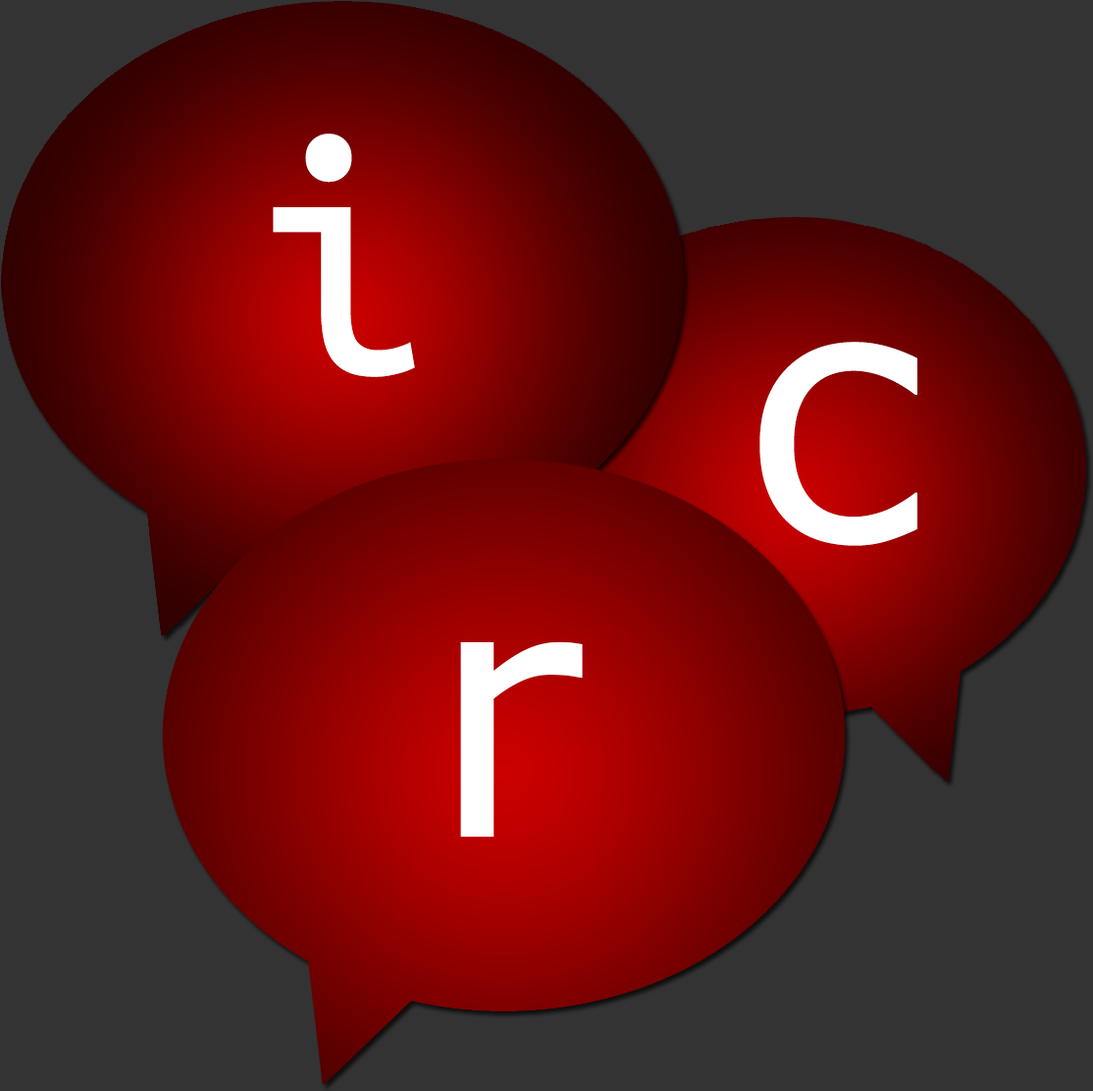
<style>
.page{position:relative;width:1093px;height:1091px;background:#333333}
.page>*{position:absolute;margin:0}
.t1{font:356.2px "UbuntuMono-Regular";color:#ffffff}
.t2{font:356.2px "Verdana";color:#ffffff}
</style>
<div class="page">
<p class="t1" style="left:273px;top:133px;width:142px;height:244px">i</p>
<p class="t2" style="left:760px;top:342px;width:158px;height:204px">c</p>
<p class="t2" style="left:460px;top:642px;width:123px;height:194px">r</p>
</div>
